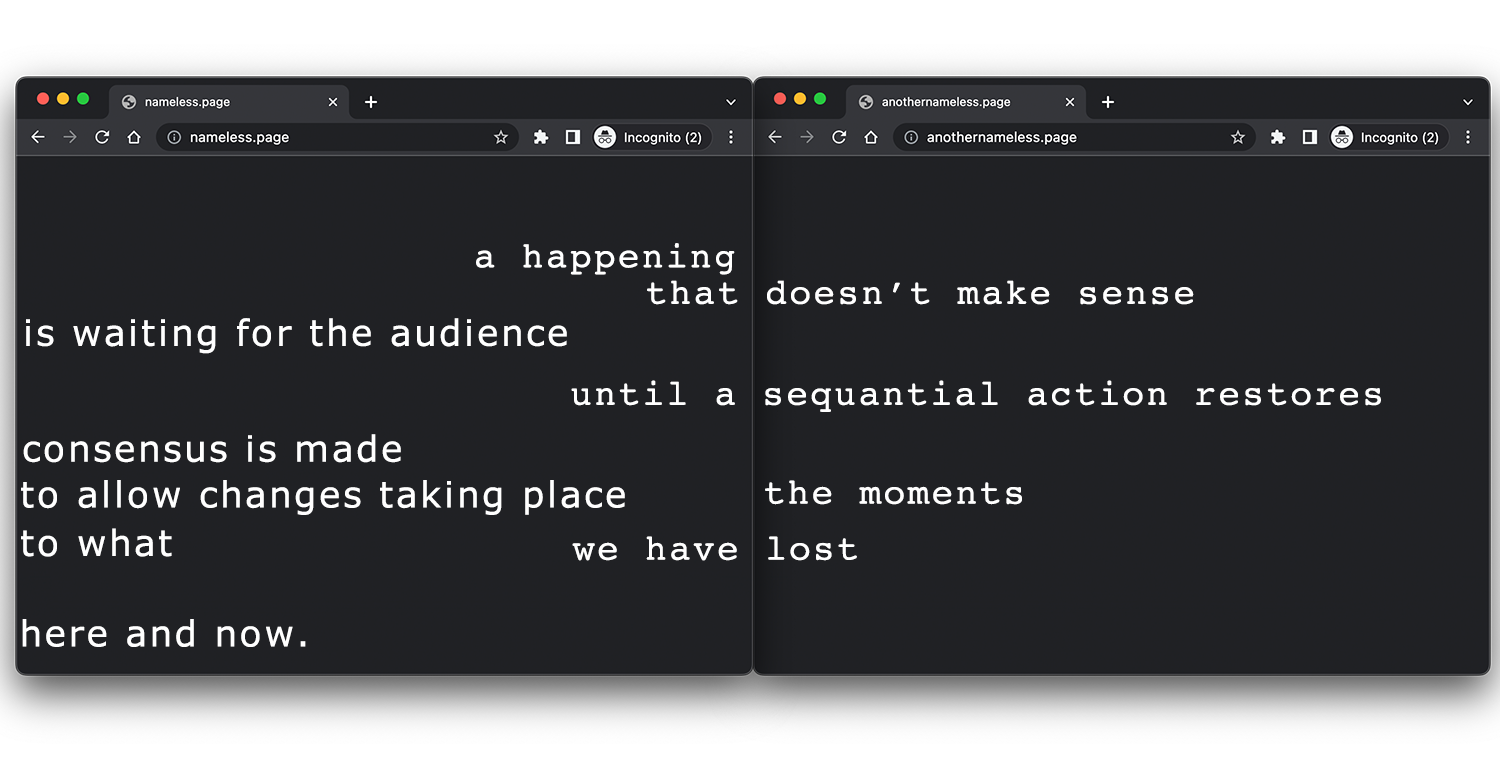
<style>
.page{position:relative;width:1500px;height:768px;background:#202124}
.page>*{position:absolute;margin:0}
.t1{font:36px/36px "Courier";letter-spacing:0.075em;color:#ffffff}
.t2{font:36px "Verdana";letter-spacing:0.075em;color:#ffffff}
.t3{font:36px "Courier";letter-spacing:0.075em;color:#ffffff}
.t4{font:36px/48px "Verdana";letter-spacing:0.075em;color:#ffffff}
.t5{font:36px/36px "Verdana";letter-spacing:0.075em;color:#ffffff}
</style>
<div class="page">
<p class="t1" style="left:476px;top:243px;width:718px;height:62px;text-align:center">a happening<br>           that doesn’t make sense</p>
<p class="t2" style="left:26px;top:318px;width:541px;height:36px">is waiting for the audience</p>
<p class="t3" style="left:571px;top:380px;width:810px;height:32px">until a sequantial action restores</p>
<p class="t2" style="left:23px;top:434px;width:378px;height:29px">consensus is made</p>
<p class="t4" style="left:21px;top:480px;width:604px;height:77px"><span class="t5">to allo</span>w changes taking place<br>to what</p>
<p class="t3" style="left:765px;top:480px;width:257px;height:25px">the moments</p>
<p class="t3" style="left:572px;top:536px;width:285px;height:25px">we have lost</p>
<p class="t2" style="left:22px;top:619px;width:284px;height:28px">here and now.</p>
</div>
